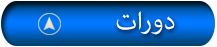
<style>
.page{position:relative;width:217px;height:47px}
.page>*{position:absolute;margin:0}
.t1{font:36px "AdobeArabic-Regular";color:#fcfcfc}
</style>
<div class="page">
<p class="t1" style="left:116px;top:11px;width:59px;height:24px">دورات</p>
</div>
